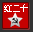
<style>
.page{position:relative;width:33px;height:32px;background:#c50000}
.page>*{position:absolute;margin:0}
.t1{font:10.4px "SimSun";letter-spacing:-0.25em;color:#ffffff}
</style>
<div class="page">
<p class="t1" style="left:4px;top:4px;width:24px;height:8px">红二十</p>
</div>
